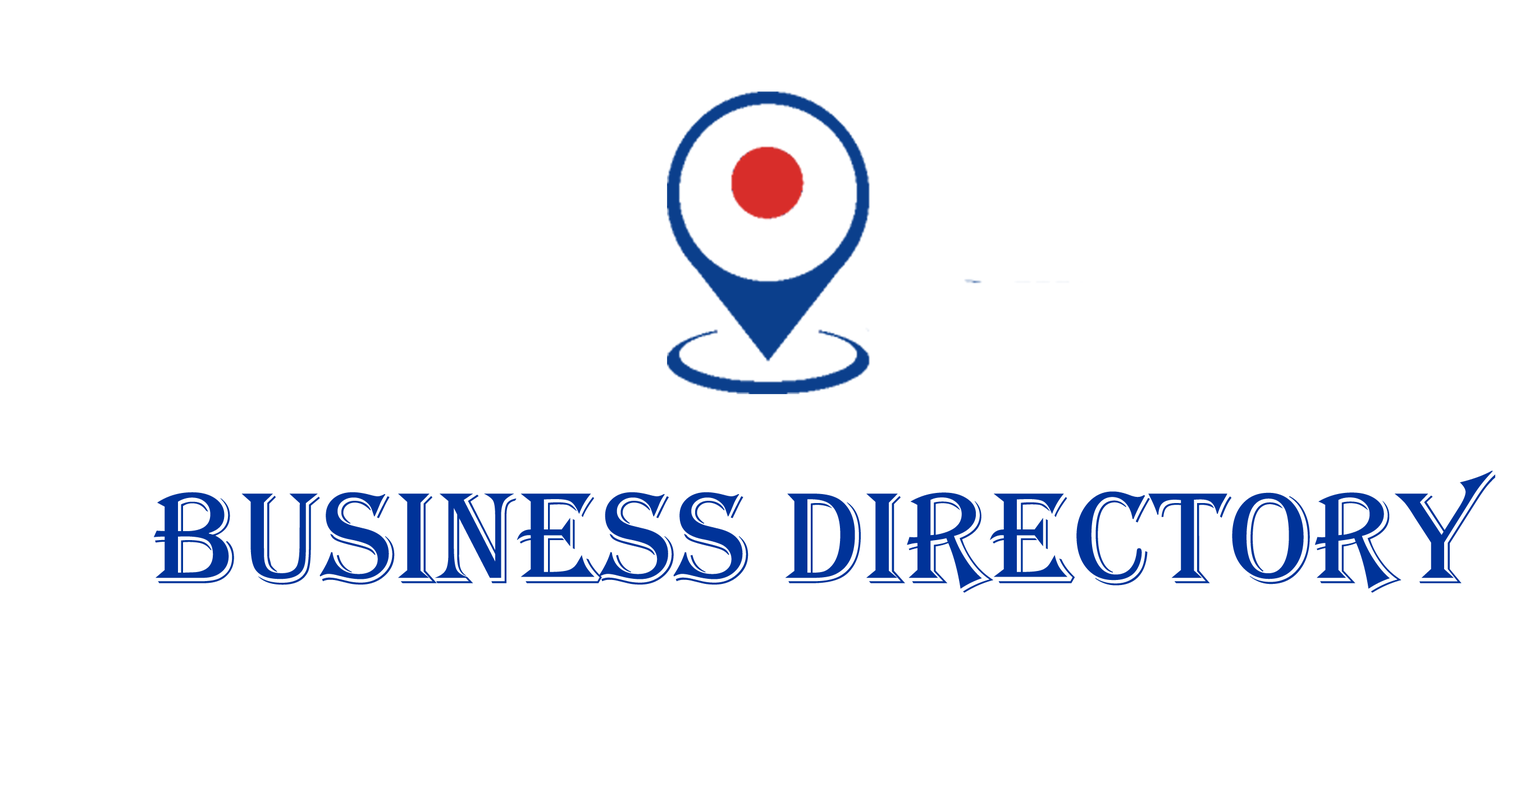
<style>
.page{position:relative;width:1516px;height:786px;background:#ffffff}
.page>*{position:absolute;margin:0}
.t1{font:134.2px "Algerian";color:#003399}
</style>
<div class="page">
<p class="t1" style="left:154px;top:471px;width:1342px;height:122px">Business Directory</p>
</div>
